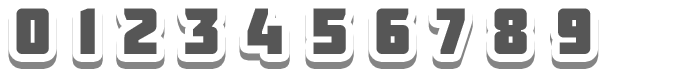
<style>
.page{position:relative;width:679px;height:69px;background:#ffffff}
.page>*{position:absolute;margin:0}
.t1{font:65.2px "Molot";letter-spacing:0.4em;color:#565656}
</style>
<div class="page">
<p class="t1" style="left:16px;top:15px;width:575px;height:46px">0123456789</p>
<p class="t1" style="left:16px;top:8px;width:575px;height:46px">0123456789</p>
</div>
